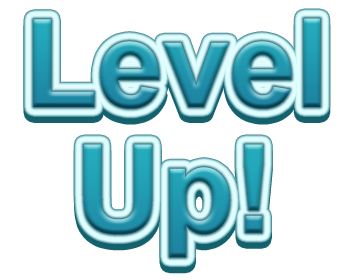
<style>
.page{position:relative;width:350px;height:280px;background:#ffffff}
.page>*{position:absolute;margin:0}
.t1{font:123.2px "Arial-BoldMT";scale:0.97 1}
.t2{font:122.8px "Arial-BoldMT"}
.t3{font:122.8px "Arial-BoldMT";color:#2098ae}
</style>
<div class="page">
<p class="t1" style="left:33px;top:24px;width:288px;height:91px">Level</p>
<p class="t1" style="left:33px;top:18px;width:288px;height:91px">Level</p>
<p class="t2" style="left:83px;top:150px;width:180px;height:114px">Up!</p>
<p class="t3" style="left:83px;top:144px;width:180px;height:114px">Up!</p>
</div>
